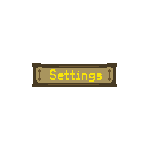
<style>
.page{position:relative;width:150px;height:150px;background:#ffffff}
.page>*{position:absolute;margin:0}
.t1{font:12.5px "KarmaSuture-Regular";color:#f8e40a}
</style>
<div class="page">
<p class="t1" style="left:50px;top:69px;width:52px;height:13px">Settings</p>
</div>
